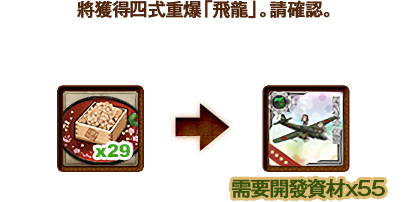
<style>
.page{position:relative;width:405px;height:202px;background:#ffffff}
.page>*{position:absolute;margin:0}
.t1{font:18px "GothicMB101Pr6N-Medium";letter-spacing:-0.04em;color:#50260d;font-weight:bold}
.t2{font:20px "GothicMB101Pr6N-Medium";letter-spacing:-0.08em;color:#375309;font-weight:bold}
</style>
<div class="page">
<p class="t1" style="left:77px;top:0px;width:253px;height:19px">將獲得四式重爆「飛龍」。請確認。</p>
<p class="t2" style="left:231px;top:178px;width:154px;height:21px">需要開發資材x55</p>
</div>
